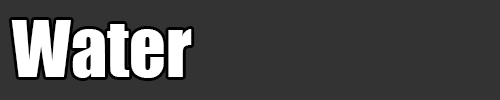
<style>
.page{position:relative;width:500px;height:100px;background:#333333}
.page>*{position:absolute;margin:0}
.t1{font:72px "Impact";color:#ffffff}
</style>
<div class="page">
<p class="t1" style="left:11px;top:20px;width:181px;height:58px">Water</p>
</div>
